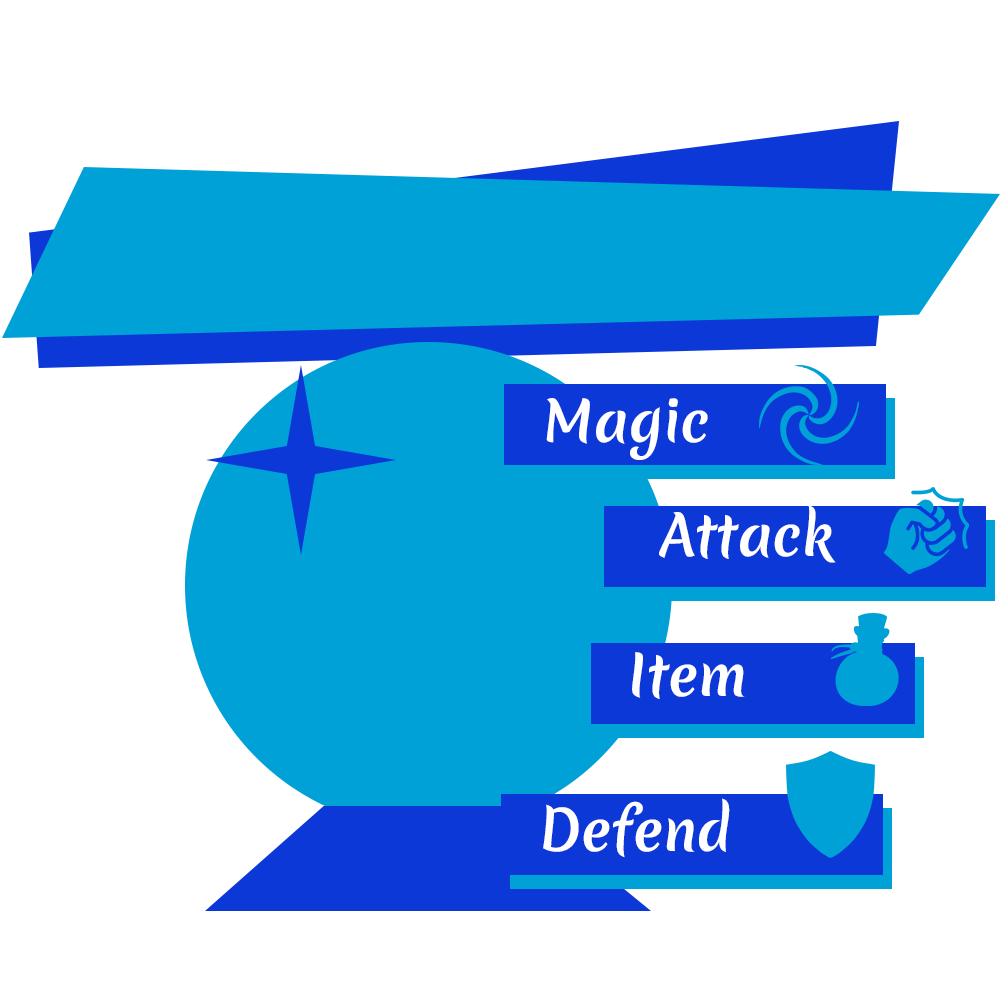
<style>
.page{position:relative;width:1000px;height:1000px;background:#ffffff}
.page>*{position:absolute;margin:0}
.t1{font:54.7px "Merienda-Bold";color:#ffffff}
</style>
<div class="page">
<p class="t1" style="left:546px;top:398px;width:162px;height:62px">Magic</p>
<p class="t1" style="left:659px;top:505px;width:177px;height:58px">Attack</p>
<p class="t1" style="left:632px;top:652px;width:113px;height:47px">Item</p>
<p class="t1" style="left:543px;top:798px;width:187px;height:60px">Defend</p>
</div>
